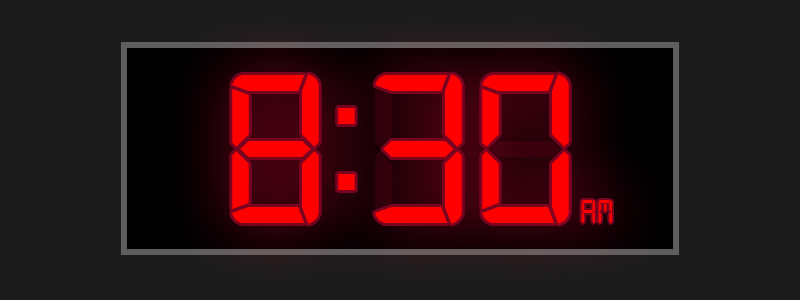
<style>
.page{position:relative;width:800px;height:300px;background:#1b1b1b}
.page>*{position:absolute;margin:0}
.t1{font:225.9px "Digital-7";color:#ff0000}
.t2{font:35px "Digital-7";color:#ff0000}
</style>
<div class="page">
<p class="t1" style="left:232px;top:74px;width:337px;height:150px">8:88</p>
<p class="t1" style="left:232px;top:74px;width:337px;height:150px">8:30</p>
<p class="t2" style="left:581px;top:200px;width:31px;height:23px">am</p>
</div>
